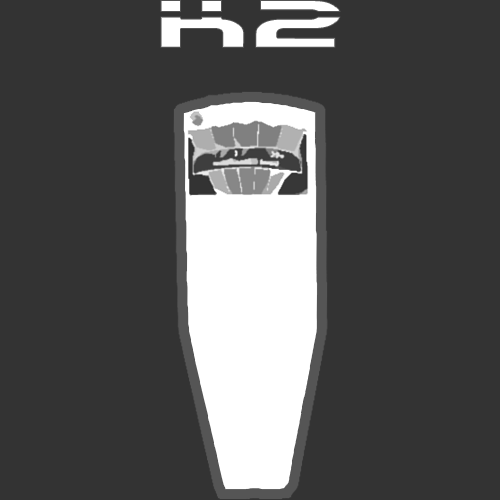
<style>
.page{position:relative;width:500px;height:500px;background:#333333}
.page>*{position:absolute;margin:0}
.t1{font:72px "Laserian";color:#ffffff}
</style>
<div class="page">
<p class="t1" style="left:160px;top:0px;width:181px;height:48px">k2</p>
</div>
